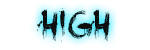
<style>
.page{position:relative;width:150px;height:50px;background:#ffffff}
.page>*{position:absolute;margin:0}
.t1{font:36px "FaceYourFears";color:#0e0e0e}
</style>
<div class="page">
<p class="t1" style="left:37px;top:8px;width:77px;height:34px">HIGH</p>
</div>
